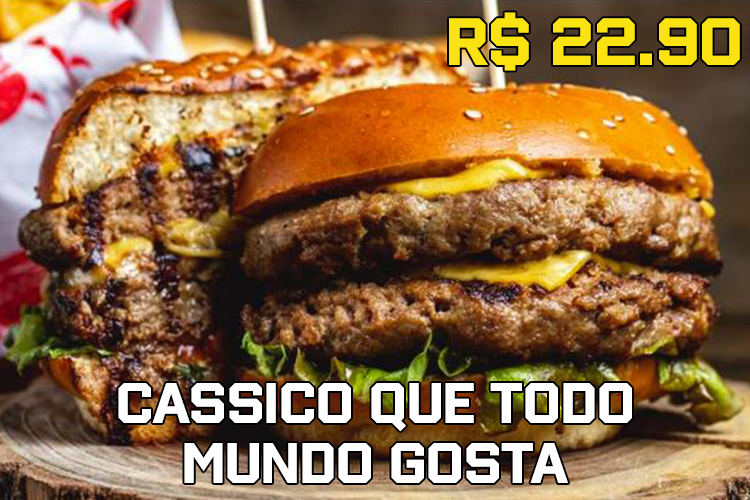
<style>
.page{position:relative;width:750px;height:500px}
.page>*{position:absolute;margin:0}
.t1{font:58.3px "WinnerSans-Bold";color:#fae311}
.t2{font:50px "WinnerSans-Bold";color:#ffffff}
</style>
<div class="page">
<p class="t1" style="left:449px;top:12px;width:291px;height:59px">R$ 22.90</p>
<p class="t2" style="left:118px;top:383px;width:514px;height:100px;text-align:center">cassico que todo<br>mundo gosta</p>
</div>
